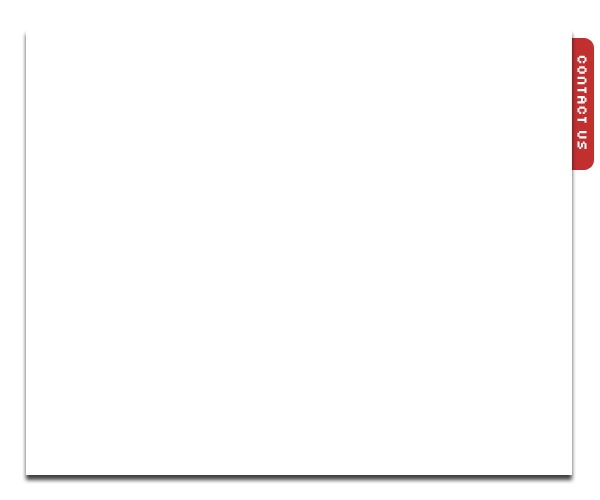
<style>
.page{position:relative;width:600px;height:500px;background:#ffffff}
.page>*{position:absolute;margin:0}
.t1{font:14px "FFFAtlantisTrial";color:#fefeff}
</style>
<div class="page">
<p class="t1" style="left:577px;top:55px;width:10px;height:94px">Contact Us</p>
</div>
